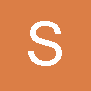
<style>
.page{position:relative;width:91px;height:91px;background:#db7e46}
.page>*{position:absolute;margin:0}
.t1{font:60px "ArialMT";color:#ffffff}
</style>
<div class="page">
<p class="t1" style="left:28px;top:21px;width:34px;height:45px">S</p>
</div>
